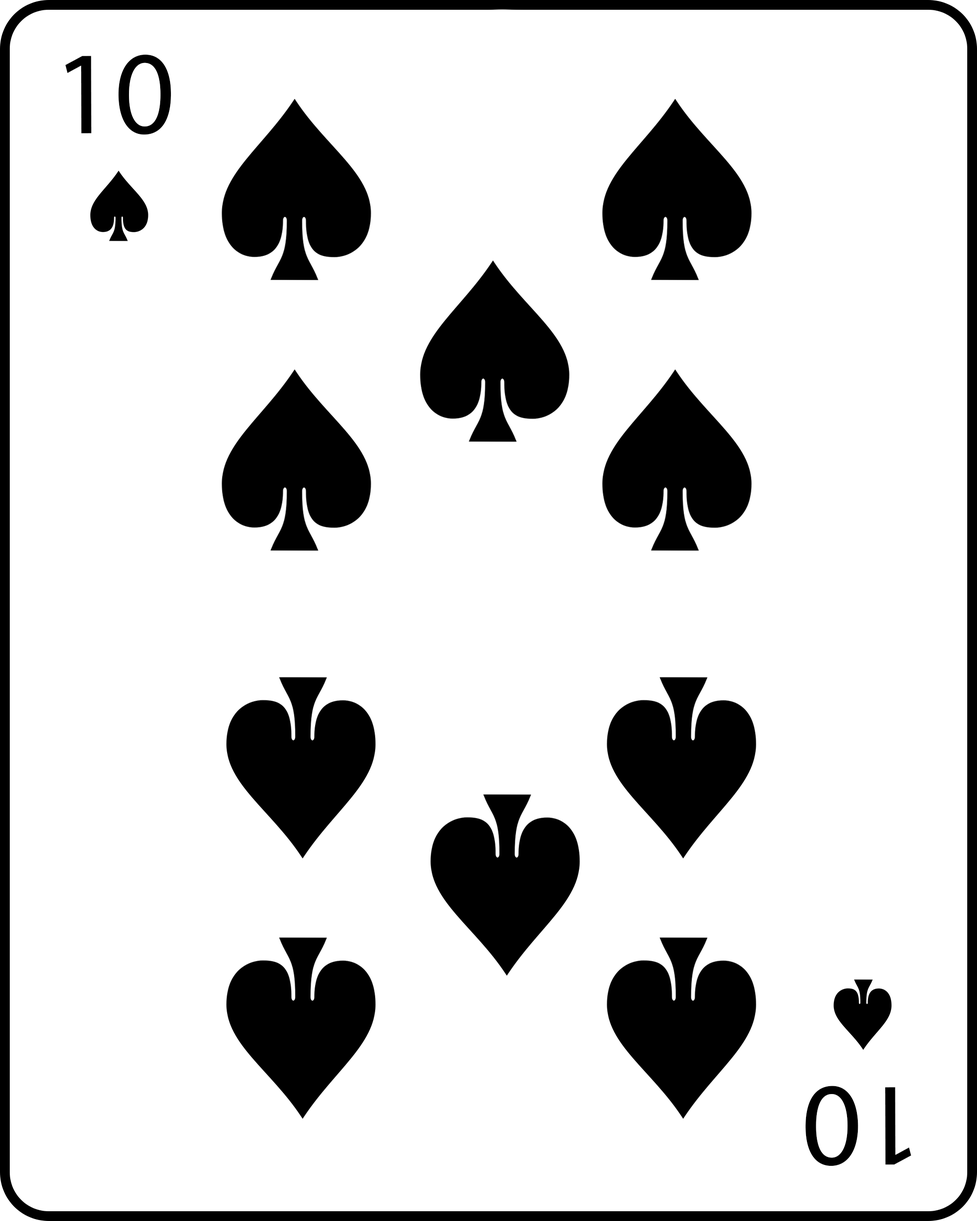
<style>
.page{position:relative;width:977px;height:1221px;background:#ffffff}
.page>*{position:absolute;margin:0}
.t1{font:166.5px "MyriadArabic-Regular";color:#000000}
</style>
<div class="page">
<p class="t1" style="left:65px;top:54px;width:106px;height:81px">10</p>
<p class="t1" style="left:805px;top:1086px;width:106px;height:80px;rotate:180deg">10</p>
</div>
